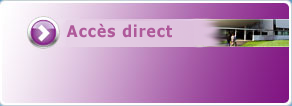
<style>
.page{position:relative;width:292px;height:106px}
.page>*{position:absolute;margin:0}
.t1{font:16.2px "Verdana-Bold";letter-spacing:0.05em;color:#af599a;scale:0.89 1}
</style>
<div class="page">
<p class="t1" style="left:66px;top:23px;width:106px;height:15px">Accès direct</p>
</div>
